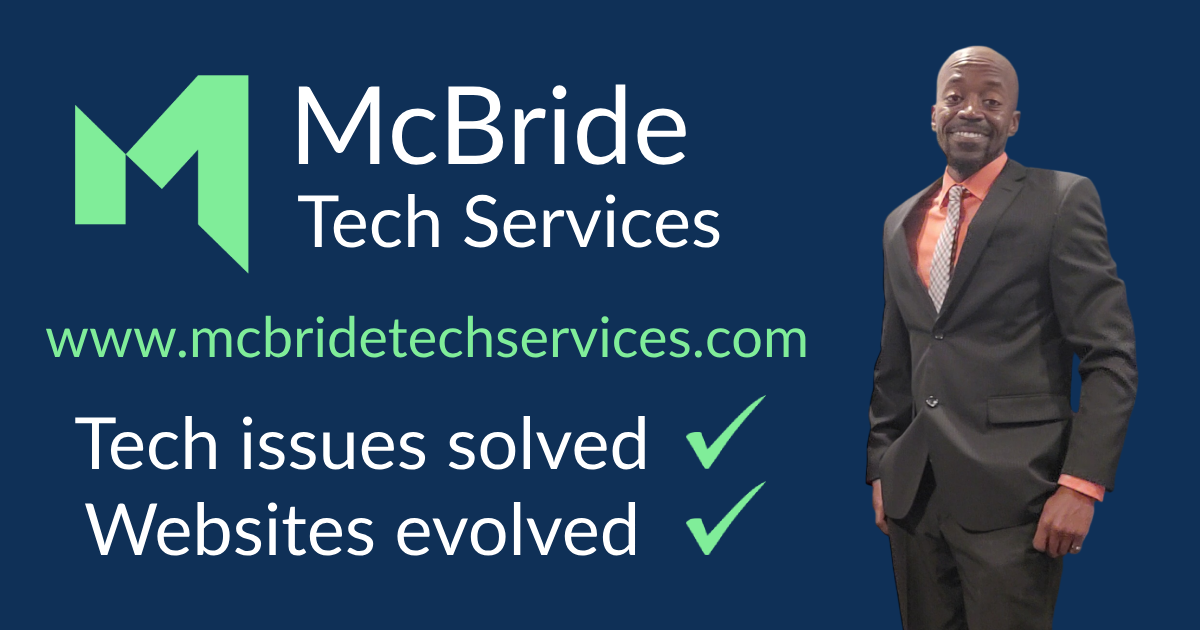
<style>
.page{position:relative;width:1200px;height:630px;background:#0f3057}
.page>*{position:absolute;margin:0}
.t1{font:108px "Lato-Regular";color:#ffffff}
.t2{font:72px "Lato-Regular";color:#ffffff}
.t3{font:56px "Lato-Regular";color:#80ed99}
</style>
<div class="page">
<p class="t1" style="left:298px;top:84px;width:388px;height:81px">McBride</p>
<p class="t2" style="left:298px;top:193px;width:422px;height:55px">Tech Services</p>
<p class="t3" style="left:45px;top:315px;width:761px;height:43px">www.mcbridetechservices.com</p>
<p class="t2" style="left:75px;top:415px;width:570px;height:141px;text-align:center">Tech issues solved<br>Websites evolved</p>
</div>
